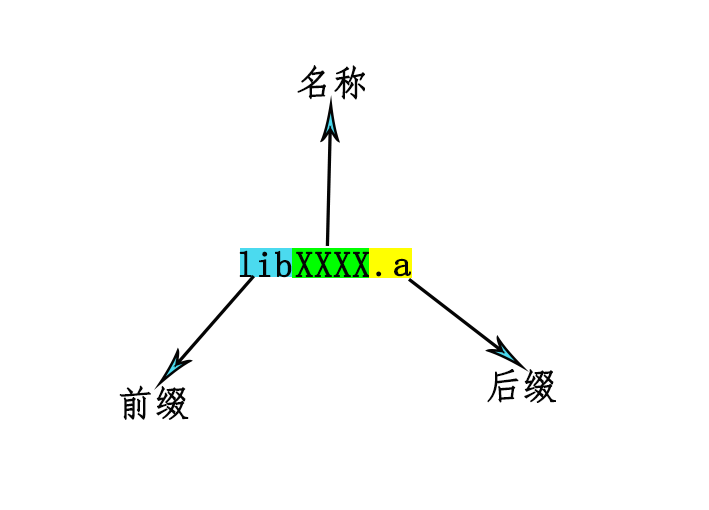
<style>
.page{position:relative;width:709px;height:510px;background:#ffffff}
.page>*{position:absolute;margin:0}
.t1{font:36px "FangSong";color:#040404;font-weight:bold}
</style>
<div class="page">
<p class="t1" style="left:297px;top:65px;width:68px;height:35px">名称</p>
<p class="t1" style="left:239px;top:250px;width:53px;height:28px">lib</p>
<p class="t1" style="left:295px;top:251px;width:75px;height:26px">XXXX</p>
<p class="t1" style="left:376px;top:258px;width:35px;height:19px">.a</p>
<p class="t1" style="left:487px;top:369px;width:69px;height:34px">后缀</p>
<p class="t1" style="left:119px;top:385px;width:70px;height:35px">前缀</p>
</div>
